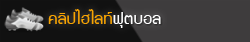
<style>
.page{position:relative;width:250px;height:42px;background:#3e3c3d}
.page>*{position:absolute;margin:0}
.t1{font:17.1px "supermarket";color:#f6a302;scale:1.11 1}
.t2{font:17.1px "supermarket";color:#ffffff;scale:1.11 1}
</style>
<div class="page">
<p class="t1" style="left:48px;top:9px;width:113px;height:19px">คลิปไฮไลท์<span class="t2">ฟุตบอล</span></p>
</div>
